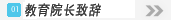
<style>
.page{position:relative;width:171px;height:20px;background:#ffffff}
.page>*{position:absolute;margin:0}
.t1{font:14px "New-Gulim";letter-spacing:0.05em;color:#333333;font-weight:bold;font-style:italic;scale:0.85 1}
</style>
<div class="page">
<p class="t1" style="left:25px;top:3px;width:76px;height:14px">教育院长致辞</p>
</div>
